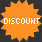
<style>
.page{position:relative;width:42px;height:42px;background:#fe9126}
.page>*{position:absolute;margin:0}
.t1{font:8.4px "MINI7";letter-spacing:-0.09em;color:#ffffff;scale:0.64 1}
</style>
<div class="page">
<p class="t1" style="left:4px;top:18px;width:36px;height:6px">DISCOUNT</p>
</div>
